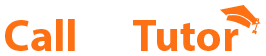
<style>
.page{position:relative;width:266px;height:56px;background:#ffffff}
.page>*{position:absolute;margin:0}
.t1{font:44.5px "MyriadPro-Bold";color:#fd7114}
.t2{font:44.5px "MyriadPro-Bold";color:#ffffff}
</style>
<div class="page">
<p class="t1" style="left:5px;top:19px;width:234px;height:32px">Call<span class="t2">-A-</span>Tutor</p>
</div>
